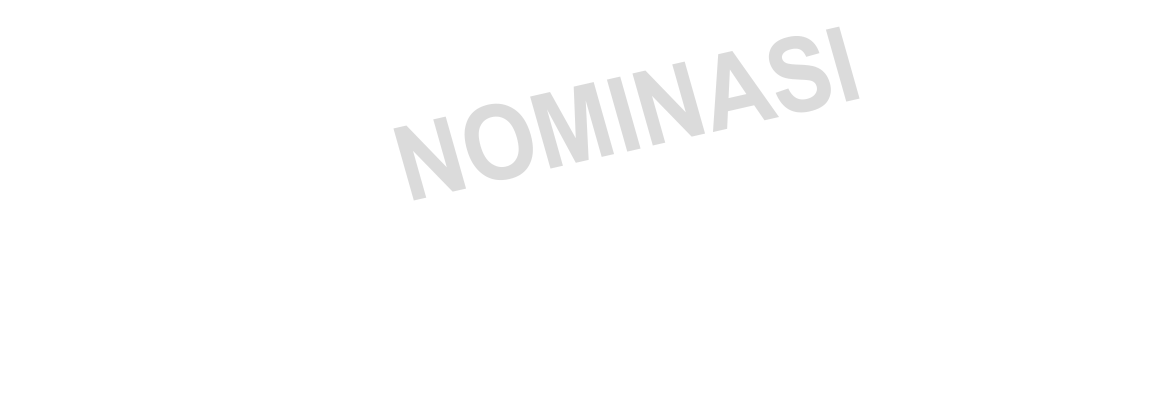
<style>
.page{position:relative;width:1164px;height:400px;background:#ffffff}
.page>*{position:absolute;margin:0}
.t1{font:104.4px "ArialNarrow-Bold";color:#dbdbdb;scale:1.1 1}
</style>
<div class="page">
<p class="t1" style="left:393px;top:26px;width:467px;height:175px;rotate:-13deg">NOMINASI</p>
</div>
